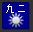
<style>
.page{position:relative;width:33px;height:32px;background:#000090}
.page>*{position:absolute;margin:0}
.t1{font:10.4px "SimSun";color:#ffffff}
</style>
<div class="page">
<p class="t1" style="left:6px;top:4px;width:19px;height:9px">九二</p>
</div>
